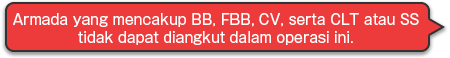
<style>
.page{position:relative;width:450px;height:58px;background:#ed3b3b}
.page>*{position:absolute;margin:0}
.t1{font:14px/18px "GothicMB101Pro-Regular";color:#ffffff}
</style>
<div class="page">
<p class="t1" style="left:13px;top:13px;width:406px;height:32px;text-align:center">Armada yang mencakup BB, FBB, CV, serta CLT atau SS<br>tidak dapat diangkut dalam operasi ini.</p>
</div>
